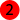
<style>
.page{position:relative;width:20px;height:20px;background:#ff0000}
.page>*{position:absolute;margin:0}
.t1{font:16px "MyriadPro-Regular";color:#000000}
</style>
<div class="page">
<p class="t1" style="left:6px;top:4px;width:7px;height:11px">2</p>
</div>
